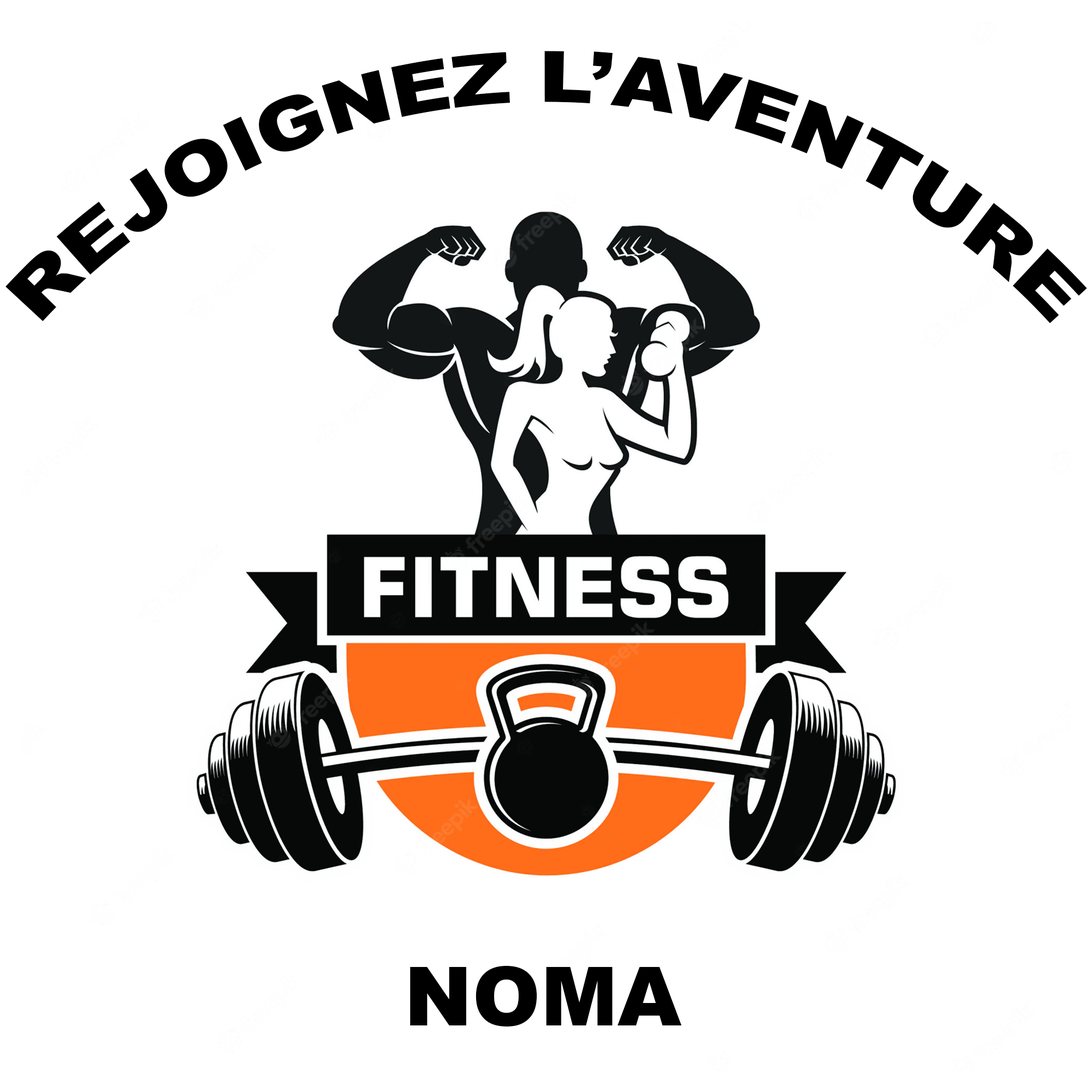
<style>
.page{position:relative;width:1092px;height:1092px;background:#ffffff}
.page>*{position:absolute;margin:0}
.t1{font:71px "Arial-Black";color:#000000}
.t2{font:81.9px "Arial-Black";color:#000000}
</style>
<div class="page">
<p class="t1" style="left:5px;top:51px;width:1082px;height:272px">REJOIGNEZ L’AVENTURE</p>
<p class="t2" style="left:410px;top:966px;width:272px;height:60px">NOMA</p>
</div>
